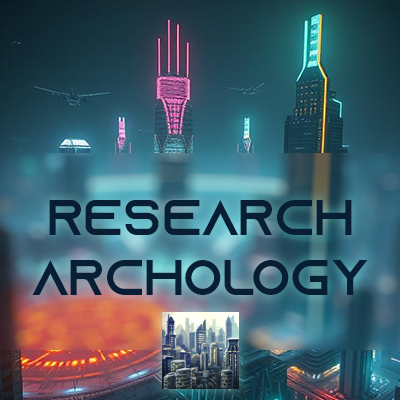
<style>
.page{position:relative;width:400px;height:400px}
.page>*{position:absolute;margin:0}
.t1{font:50px "AzonixRegular";color:#081e35}
</style>
<div class="page">
<p class="t1" style="left:32px;top:200px;width:336px;height:95px;text-align:center">Research<br>Archology</p>
</div>
